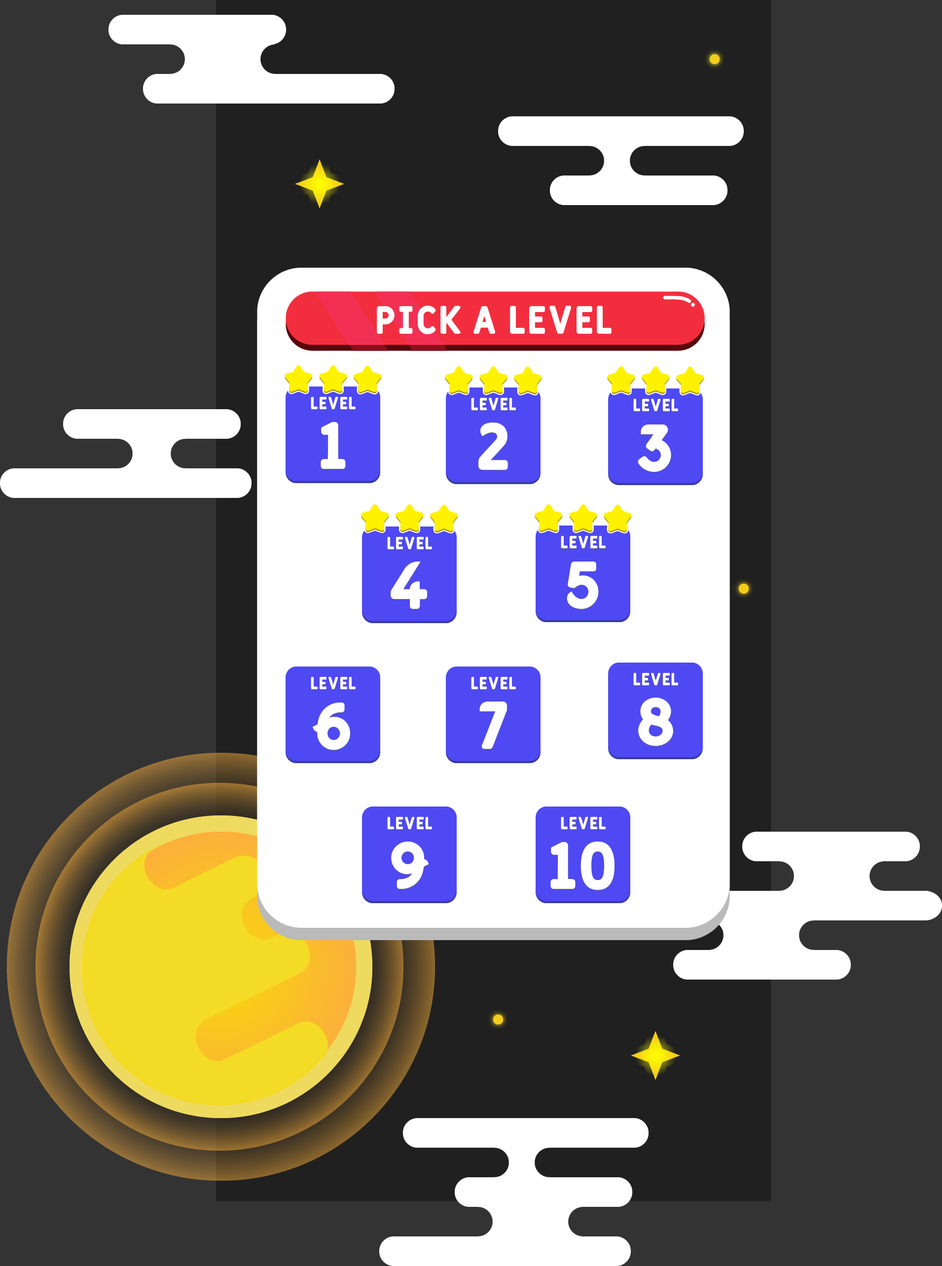
<style>
.page{position:relative;width:942px;height:1266px;background:#333333}
.page>*{position:absolute;margin:0}
.t1{font:39.4px "Fulbo-Argenta";color:#ffffff}
.t2{font:17.4px "Fulbo-Argenta";color:#ffffff}
.t3{font:65.3px "Fulbo-Argenta";color:#ffffff}
</style>
<div class="page">
<p class="t1" style="left:377px;top:306px;width:234px;height:28px">Pick a Level</p>
<p class="t2" style="left:311px;top:397px;width:44px;height:13px">Level</p>
<p class="t2" style="left:311px;top:397px;width:44px;height:12px">Level</p>
<p class="t2" style="left:471px;top:398px;width:45px;height:13px">Level</p>
<p class="t2" style="left:471px;top:398px;width:45px;height:12px">Level</p>
<p class="t2" style="left:633px;top:399px;width:45px;height:13px">Level</p>
<p class="t2" style="left:633px;top:399px;width:45px;height:12px">Level</p>
<p class="t3" style="left:320px;top:423px;width:26px;height:46px">1</p>
<p class="t3" style="left:320px;top:422px;width:26px;height:47px">1</p>
<p class="t3" style="left:478px;top:423px;width:30px;height:47px">2</p>
<p class="t3" style="left:478px;top:423px;width:30px;height:47px">2</p>
<p class="t3" style="left:638px;top:425px;width:33px;height:47px">3</p>
<p class="t3" style="left:638px;top:425px;width:33px;height:47px">3</p>
<p class="t2" style="left:387px;top:537px;width:45px;height:13px">Level</p>
<p class="t2" style="left:387px;top:537px;width:45px;height:12px">Level</p>
<p class="t2" style="left:561px;top:536px;width:44px;height:13px">Level</p>
<p class="t2" style="left:561px;top:536px;width:44px;height:12px">Level</p>
<p class="t3" style="left:391px;top:562px;width:36px;height:47px">4</p>
<p class="t3" style="left:391px;top:562px;width:36px;height:47px">4</p>
<p class="t3" style="left:567px;top:562px;width:32px;height:47px">5</p>
<p class="t3" style="left:567px;top:562px;width:32px;height:47px">5</p>
<p class="t2" style="left:311px;top:677px;width:44px;height:13px">Level</p>
<p class="t2" style="left:311px;top:677px;width:44px;height:12px">Level</p>
<p class="t2" style="left:471px;top:677px;width:45px;height:13px">Level</p>
<p class="t2" style="left:471px;top:677px;width:45px;height:12px">Level</p>
<p class="t2" style="left:633px;top:674px;width:45px;height:12px">Level</p>
<p class="t2" style="left:633px;top:673px;width:45px;height:12px">Level</p>
<p class="t3" style="left:479px;top:702px;width:28px;height:47px">7</p>
<p class="t3" style="left:638px;top:698px;width:35px;height:48px">8</p>
<p class="t3" style="left:638px;top:698px;width:35px;height:48px">8</p>
<p class="t3" style="left:313px;top:703px;width:37px;height:47px">6</p>
<p class="t3" style="left:313px;top:703px;width:37px;height:47px">6</p>
<p class="t3" style="left:479px;top:702px;width:28px;height:47px">7</p>
<p class="t2" style="left:387px;top:817px;width:45px;height:13px">Level</p>
<p class="t2" style="left:387px;top:817px;width:45px;height:12px">Level</p>
<p class="t2" style="left:561px;top:817px;width:44px;height:13px">Level</p>
<p class="t2" style="left:561px;top:817px;width:44px;height:12px">Level</p>
<p class="t3" style="left:391px;top:842px;width:38px;height:47px">9</p>
<p class="t3" style="left:391px;top:842px;width:38px;height:47px">9</p>
<p class="t3" style="left:550px;top:842px;width:64px;height:48px">10</p>
<p class="t3" style="left:550px;top:842px;width:64px;height:48px">10</p>
</div>
